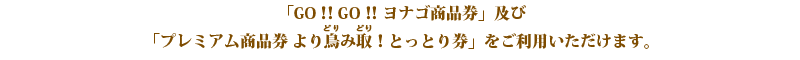
<style>
.page{position:relative;width:800px;height:60px;background:#ffffff}
.page>*{position:absolute;margin:0}
.t1{font:16px "KozMinPr6N-Heavy";color:#7e4c00}
.t2{font:7.2px "YuGo-Bold";color:#7e4c00;scale:1.25 1}
</style>
<div class="page">
<p class="t1" style="left:154px;top:5px;width:495px;height:44px;text-align:center">「GO！！GO！！ヨナゴ商品券」及び<br>「プレミアム商品券 より鳥み取！とっとり券」をご利用いただけます。</p>
<p class="t2" style="left:323px;top:24px;width:49px;height:8px">どり　どり</p>
</div>
